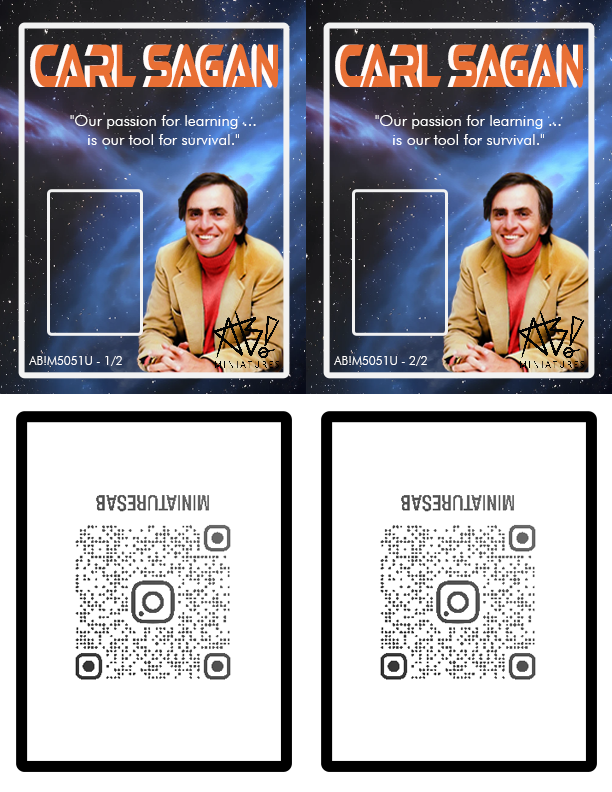
<style>
.page{position:relative;width:612px;height:792px;background:#ffffff}
.page>*{position:absolute;margin:0}
.t1{font:63.2px "EthnocentricRg-Regular";scale:0.43 1}
.t2{font:63.2px "EthnocentricRg-Regular";color:#e86f34;scale:0.43 1}
.t3{font:16px "FuturaBT-Light";color:#ffffff}
.t4{font:12px "FuturaBT-Light";color:#ffffff}
</style>
<div class="page">
<p class="t1" style="left:30px;top:44px;width:243px;height:44px">Carl sagan</p>
<p class="t2" style="left:35px;top:44px;width:243px;height:44px">Carl sagan</p>
<p class="t1" style="left:335px;top:44px;width:243px;height:44px">Carl sagan</p>
<p class="t2" style="left:340px;top:44px;width:243px;height:44px">Carl sagan</p>
<p class="t3" style="left:70px;top:115px;width:186px;height:30px;text-align:center">"Our passion for learning ... is our tool for survival."</p>
<p class="t3" style="left:375px;top:115px;width:186px;height:30px;text-align:center">"Our passion for learning ... is our tool for survival."</p>
<p class="t4" style="left:29px;top:356px;width:93px;height:10px">AB!M5051U - 1/2</p>
<p class="t4" style="left:334px;top:356px;width:93px;height:10px">AB!M5051U - 2/2</p>
</div>
